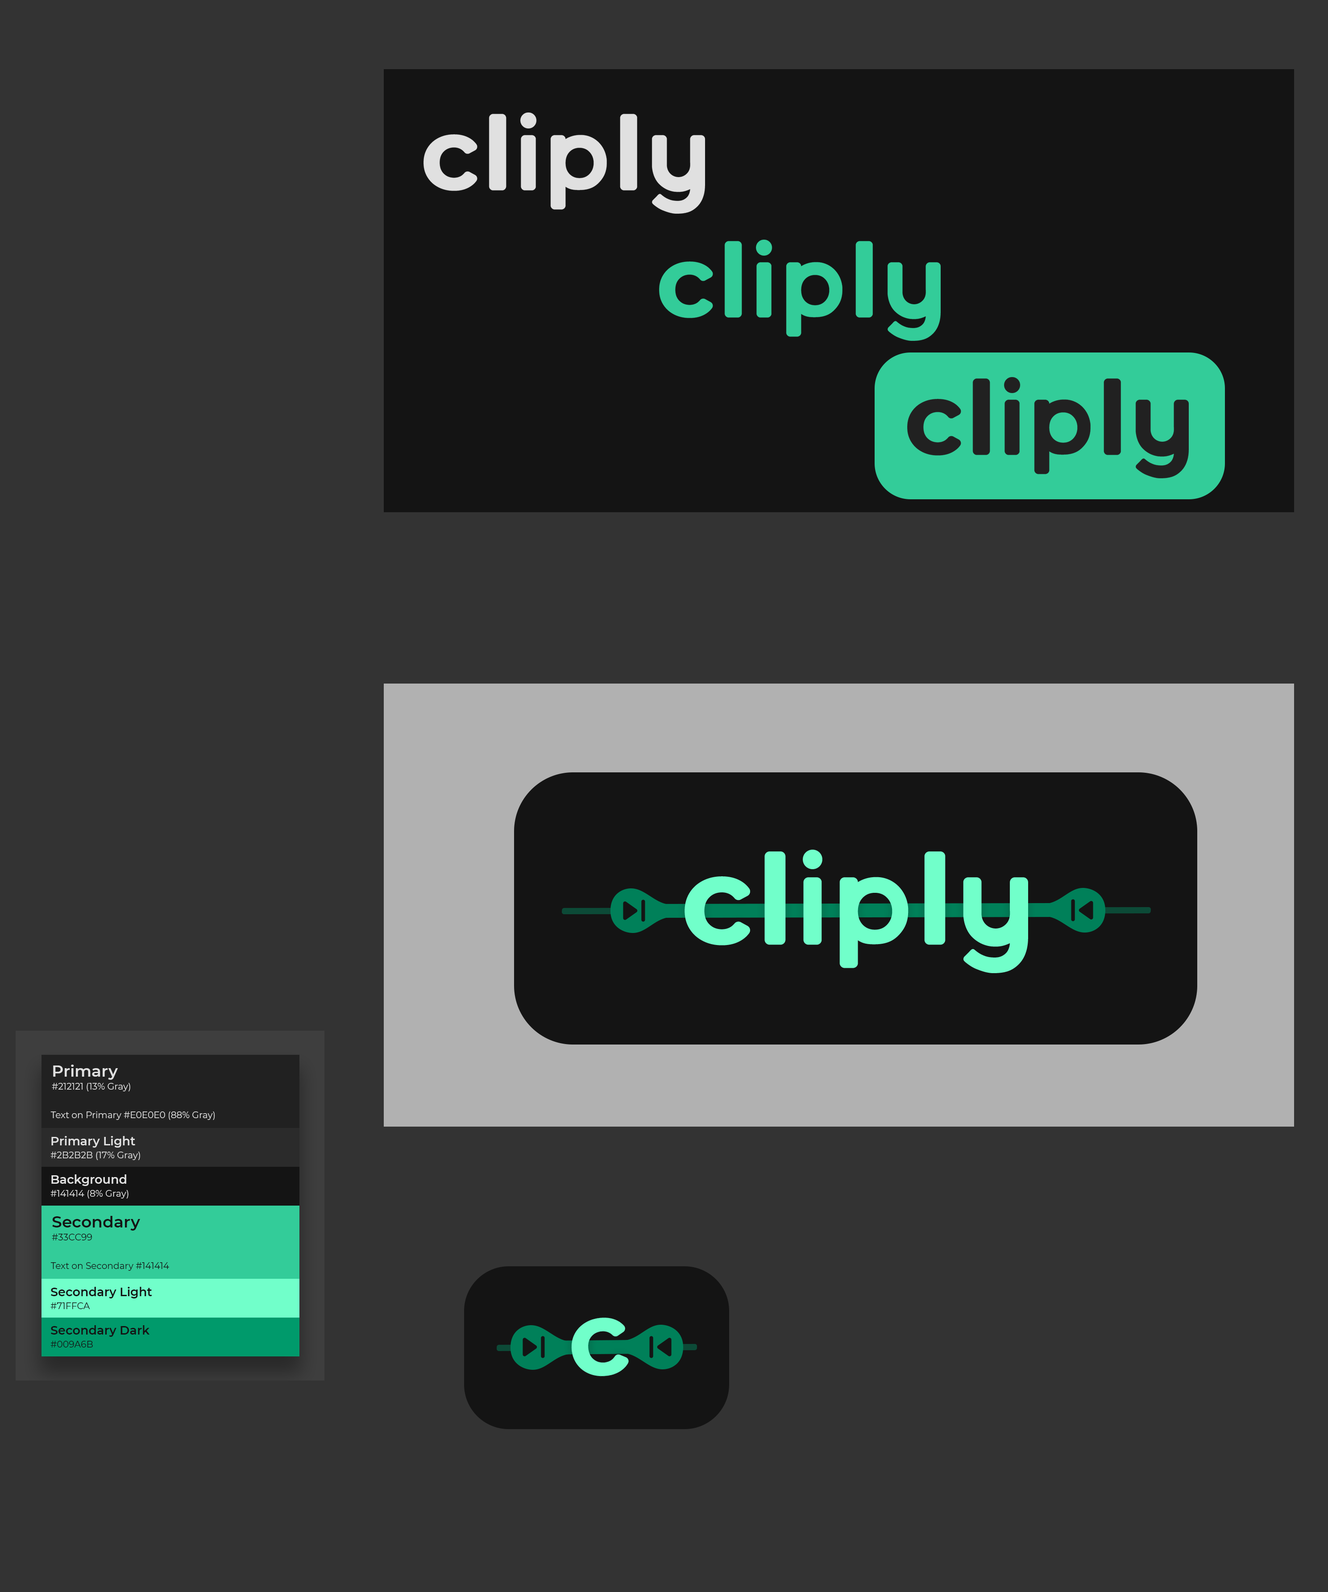
<style>
.page{position:relative;width:1328px;height:1592px;background:#333333}
.page>*{position:absolute;margin:0}
.t1{font:9px/12.9px "Montserrat-Regular";color:#e0e0e0}
.t2{font:15.9px/12.9px "Montserrat-SemiBold";color:#e0e0e0}
.t3{font:9px "Montserrat-Regular";color:#e0e0e0}
.t4{font:11.9px/12.9px "Montserrat-SemiBold";color:#e0e0e0}
.t5{font:15.9px/12.9px "Montserrat-SemiBold";color:#141414}
.t6{font:9px/12.9px "Montserrat-Regular";color:#141414}
.t7{font:9px "Montserrat-Regular";color:#141414}
.t8{font:11.9px/12.9px "Montserrat-SemiBold";color:#141414}
</style>
<div class="page">
<p class="t1" style="left:52px;top:1065px;width:78px;height:26px"><span class="t2">Primary<br></span>#212121 (13% Gray)</p>
<p class="t3" style="left:50px;top:1112px;width:165px;height:8px">Text on Primary #E0E0E0 (88% Gray)</p>
<p class="t1" style="left:50px;top:1136px;width:90px;height:24px"><span class="t4">Primary Light<br></span>#2B2B2B (17% Gray)</p>
<p class="t1" style="left:50px;top:1174px;width:79px;height:25px"><span class="t4">Background<br></span>#141414 (8% Gray)</p>
<p class="t5" style="left:52px;top:1216px;width:88px;height:24px">Secondary<br><span class="t6">#33CC99</span></p>
<p class="t7" style="left:50px;top:1262px;width:119px;height:9px">Text on Secondary #141414</p>
<p class="t8" style="left:50px;top:1287px;width:102px;height:22px">Secondary Light<br><span class="t6">#71FFCA</span></p>
<p class="t8" style="left:50px;top:1325px;width:100px;height:23px">Secondary Dark<br><span class="t6">#009A6B</span></p>
</div>
